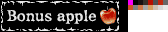
<style>
.page{position:relative;width:168px;height:32px;background:#000000}
.page>*{position:absolute;margin:0}
.t1{font:15px "ComicMysteryStd-DB";color:#e8e8e8}
.t2{font:15px "ComicMysteryStd-DB";letter-spacing:-0.01em;color:#e8e8e8}
</style>
<div class="page">
<p class="t1" style="left:7px;top:10px;width:89px;height:14px">Bonus a<span class="t2">p</span>ple</p>
</div>
